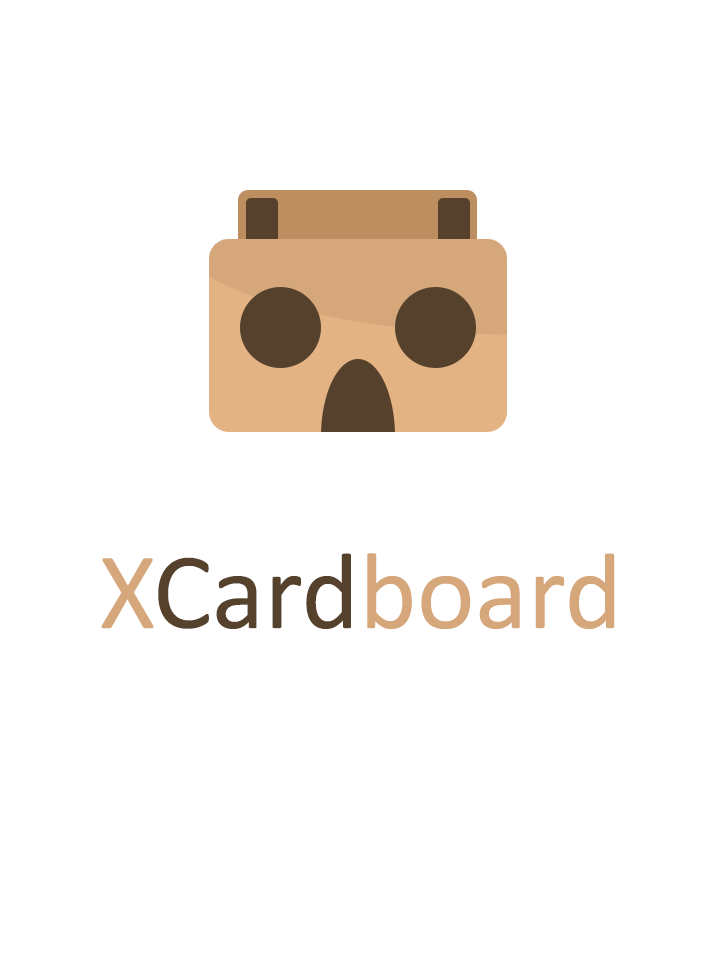
<style>
.page{position:relative;width:720px;height:960px;background:#ffffff}
.page>*{position:absolute;margin:0}
.t1{font:110px "Calibri";color:#d6a77a}
.t2{font:110px "Calibri";color:#56422c}
</style>
<div class="page">
<p class="t1" style="left:101px;top:553px;width:514px;height:76px">X<span class="t2">Card</span>board</p>
</div>
